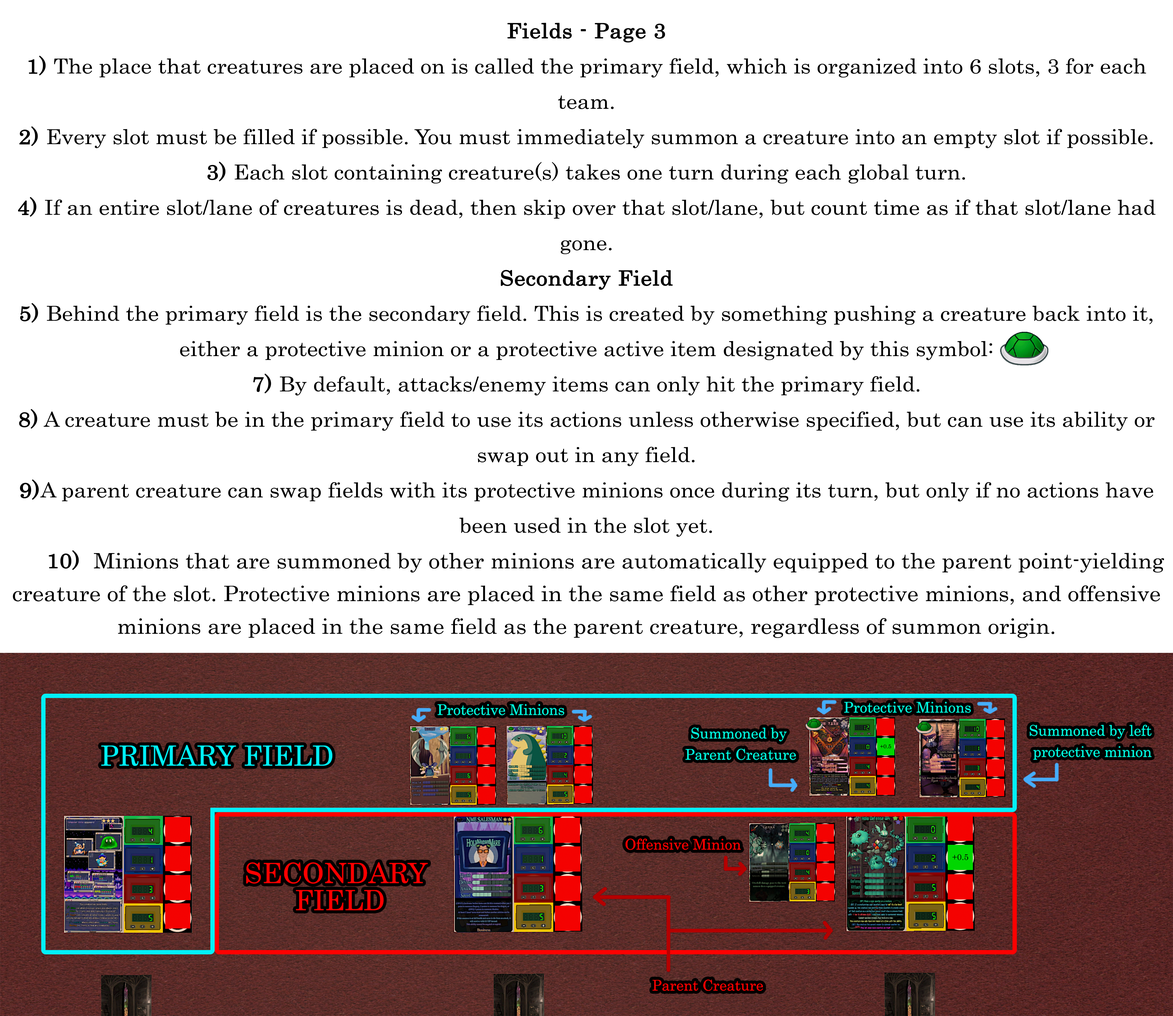
<style>
.page{position:relative;width:1173px;height:1016px;background:#ffffff}
.page>*{position:absolute;margin:0}
.t1{font:36.4px/32.7px "Century";color:#000000;scale:1.07 1}
.t2{font:35.3px/35.3px "Century";color:#000000;font-weight:bold;scale:1.07 1}
.t3{font:35.3px/35.3px "Century";color:#000000;scale:1.07 1}
.t4{font:36.4px/32.7px "Century";color:#000000;font-weight:bold;scale:1.07 1}
</style>
<div class="page">
<p class="t1" style="left:13px;top:23px;width:1152px;height:615px;text-align:center"><span class="t2">Fields - Page 3<br>1)</span><span class="t3"> The place that creatures are placed on is called the primary field, which is organized into 6 slots, 3 for each team.<br></span><span class="t2">2)</span><span class="t3"> Every slot must be filled if possible. You must immediately summon a creature into an empty slot if possible.<br></span><span class="t2">3)</span><span class="t3"> Each slot containing creature(s) takes one turn during each global turn.<br></span><span class="t2">4)</span><span class="t3"> If an entire slot/lane of creatures is dead, then skip over that slot/lane, but count time as if that slot/lane had gone.<br></span><span class="t2">Secondary Field<br>5)</span><span class="t3"> Behind the primary field is the secondary field. This is created by something pushing a creature back into it, either a protective minion or a protective active item designated by this symbol:<br></span><span class="t2">7)</span><span class="t3"> By default, attacks/enemy items can only hit the primary field.<br></span><span class="t2">8)</span><span class="t3"> A creature must be in the primary field to use its actions unless otherwise specified, but can use its ability or swap out in any field.<br></span><span class="t4">9)</span><span class="t3">A parent creature can swap fields with its protective minions once during its turn, but only if no actions have been used in the slot yet.<br>      </span><span class="t2">10)  </span>Minions that are summoned by other minions are automatically equipped to the parent point-yielding creature of the slot. Protective minions are placed in the same field as other protective minions, and offensive minions are placed in the same field as the parent creature, regardless of summon origin.</p>
</div>
